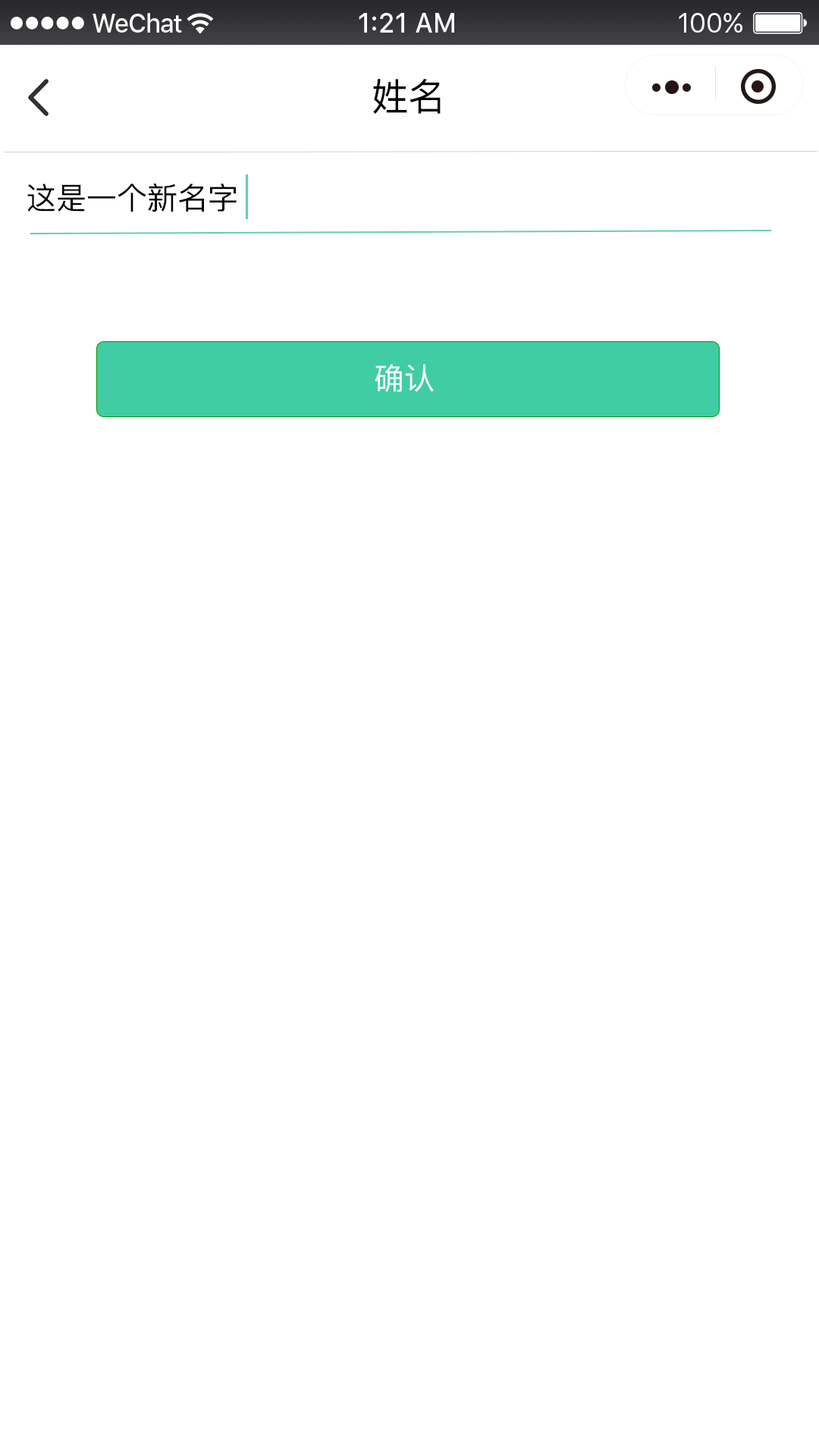
<style>
.page{position:relative;width:819px;height:1456px;background:#ffffff}
.page>*{position:absolute;margin:0}
.t1{font:37.9px "PingFangSC-Regular";color:#000000}
.t2{font:30.3px "PingFangSC-Regular";color:#000000}
.t3{font:30.3px "PingFangSC-Regular";color:#ffffff}
</style>
<div class="page">
<p class="t1" style="left:373px;top:79px;width:68px;height:36px">姓名</p>
<p class="t2" style="left:27px;top:183px;width:210px;height:29px">这是一个新名字</p>
<p class="t3" style="left:375px;top:364px;width:59px;height:28px">确认</p>
</div>
